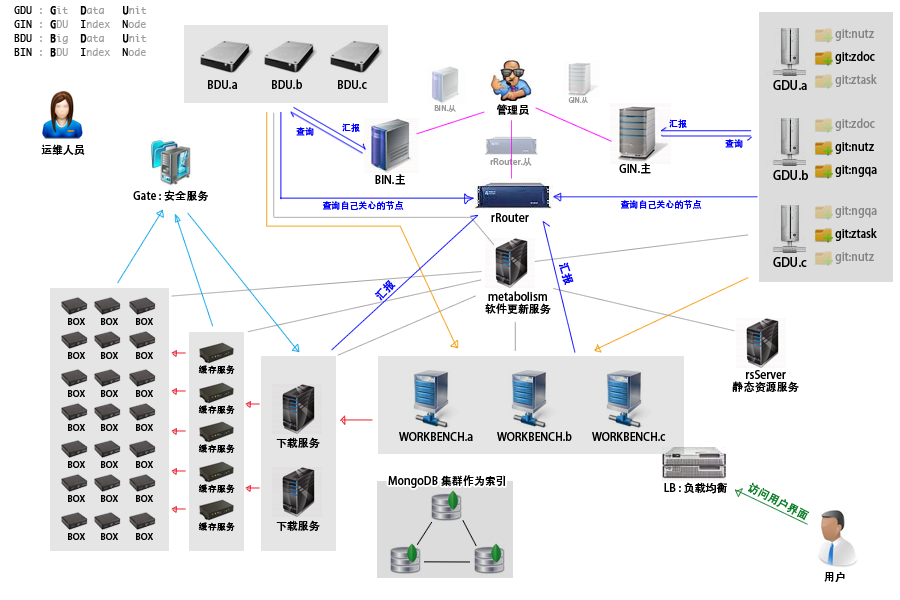
<style>
.page{position:relative;width:900px;height:600px;background:#ffffff}
.page>*{position:absolute;margin:0}
.t1{font:10px/14px "Monaco";color:#a0a0a0}
.t2{font:10px/14px "Monaco";color:#000000}
.t3{font:10px/14px "Monaco";color:#010101;font-weight:bold}
.t4{font:10px/14px "Monaco";color:#000000;font-weight:bold}
.t5{font:11px "AdobeHeitiStd-Regular";color:#848484}
.t6{font:11px "AdobeHeitiStd-Regular";color:#000000}
.t7{font:12px "AdobeHeitiStd-Regular";color:#000000}
.t8{font:6.7px "AdobeHeitiStd-Regular";color:#999999}
.t9{font:7.6px "AdobeHeitiStd-Regular";color:#999999}
.t10{font:9px "AdobeHeitiStd-Regular";color:#0000ff}
.t11{font:9px "AdobeHeitiStd-Regular";color:#999999}
.t12{font:11px "AdobeHeitiStd-Regular";color:#0000ff}
.t13{font:11px/12px "AdobeHeitiStd-Regular";color:#000000}
.t14{font:9px "AdobeHeitiStd-Regular";color:#000000}
.t15{font:11px "AdobeHeitiStd-Regular";color:#097c25}
</style>
<div class="page">
<p class="t1" style="left:14px;top:6px;width:133px;height:51px"><span class="t2">GDU</span> : <span class="t3">G</span>it  <span class="t4">D</span>ata   <span class="t4">U</span>nit<br><span class="t2">GIN</span> : <span class="t4">G</span>DU<span class="t2">  I</span>ndex <span class="t2"> N</span>ode<br><span class="t2">BDU</span> : <span class="t4">B</span>ig  <span class="t4">D</span>ata   <span class="t4">U</span>nit<br><span class="t2">BIN</span> : <span class="t4">B</span>DU<span class="t2">  I</span>ndex <span class="t2"> N</span>ode</p>
<p class="t5" style="left:835px;top:29px;width:39px;height:12px">git:nutz</p>
<p class="t6" style="left:835px;top:51px;width:40px;height:13px">git:zdoc</p>
<p class="t5" style="left:835px;top:74px;width:42px;height:13px">git:ztask</p>
<p class="t6" style="left:208px;top:80px;width:29px;height:9px">BDU.a</p>
<p class="t6" style="left:272px;top:79px;width:30px;height:10px">BDU.b</p>
<p class="t6" style="left:338px;top:80px;width:29px;height:9px">BDU.c</p>
<p class="t7" style="left:773px;top:80px;width:34px;height:10px">GDU.a</p>
<p class="t8" style="left:568px;top:97px;width:20px;height:7px">GIN.从</p>
<p class="t9" style="left:434px;top:105px;width:22px;height:7px">BIN.从</p>
<p class="t6" style="left:497px;top:104px;width:32px;height:11px">管理员</p>
<p class="t10" style="left:342px;top:123px;width:18px;height:9px">汇报</p>
<p class="t10" style="left:669px;top:119px;width:18px;height:9px">汇报</p>
<p class="t5" style="left:835px;top:118px;width:40px;height:13px">git:zdoc</p>
<p class="t10" style="left:296px;top:127px;width:18px;height:9px">查询</p>
<p class="t6" style="left:41px;top:144px;width:44px;height:11px">运维人员</p>
<p class="t10" style="left:725px;top:139px;width:18px;height:9px">查询</p>
<p class="t6" style="left:835px;top:142px;width:39px;height:12px">git:nutz</p>
<p class="t11" style="left:490px;top:157px;width:42px;height:9px">rRouter.从</p>
<p class="t6" style="left:375px;top:174px;width:30px;height:11px">BIN.主</p>
<p class="t6" style="left:619px;top:163px;width:32px;height:11px">GIN.主</p>
<p class="t7" style="left:773px;top:170px;width:35px;height:10px">GDU.b</p>
<p class="t6" style="left:835px;top:165px;width:42px;height:12px">git:ngqa</p>
<p class="t6" style="left:133px;top:190px;width:75px;height:11px">Gate : 安全服务</p>
<p class="t10" style="left:322px;top:201px;width:82px;height:9px">查询自己关心的节点</p>
<p class="t10" style="left:620px;top:200px;width:82px;height:9px">查询自己关心的节点</p>
<p class="t5" style="left:835px;top:206px;width:42px;height:12px">git:ngqa</p>
<p class="t6" style="left:491px;top:213px;width:38px;height:9px">rRouter</p>
<p class="t6" style="left:835px;top:228px;width:42px;height:13px">git:ztask</p>
<p class="t7" style="left:773px;top:257px;width:34px;height:10px">GDU.c</p>
<p class="t5" style="left:835px;top:252px;width:39px;height:12px">git:nutz</p>
<p class="t12" style="left:558px;top:262px;width:16px;height:23px;rotate:71deg">汇报</p>
<p class="t12" style="left:374px;top:280px;width:22px;height:21px;rotate:-46deg">汇报</p>
<p class="t13" style="left:485px;top:291px;width:66px;height:23px;text-align:center">metabolism<br>软件更新服务</p>
<p class="t14" style="left:198px;top:365px;width:37px;height:9px">缓存服务</p>
<p class="t13" style="left:732px;top:370px;width:67px;height:23px;text-align:center">rsServer<br>静态资源服务</p>
<p class="t14" style="left:198px;top:405px;width:37px;height:9px">缓存服务</p>
<p class="t6" style="left:276px;top:437px;width:44px;height:11px">下载服务</p>
<p class="t6" style="left:399px;top:432px;width:74px;height:9px">WORKBENCH.a</p>
<p class="t6" style="left:497px;top:431px;width:75px;height:10px">WORKBENCH.b</p>
<p class="t6" style="left:592px;top:432px;width:74px;height:9px">WORKBENCH.c</p>
<p class="t14" style="left:198px;top:444px;width:37px;height:9px">缓存服务</p>
<p class="t14" style="left:198px;top:484px;width:37px;height:9px">缓存服务</p>
<p class="t6" style="left:388px;top:475px;width:118px;height:13px">MongoDB 集群作为索引</p>
<p class="t6" style="left:664px;top:482px;width:63px;height:12px">LB : 负载均衡</p>
<p class="t15" style="left:748px;top:482px;width:62px;height:39px;rotate:27deg">访问用户界面</p>
<p class="t6" style="left:276px;top:520px;width:44px;height:11px">下载服务</p>
<p class="t14" style="left:198px;top:522px;width:37px;height:9px">缓存服务</p>
<p class="t6" style="left:824px;top:572px;width:21px;height:10px">用户</p>
</div>
